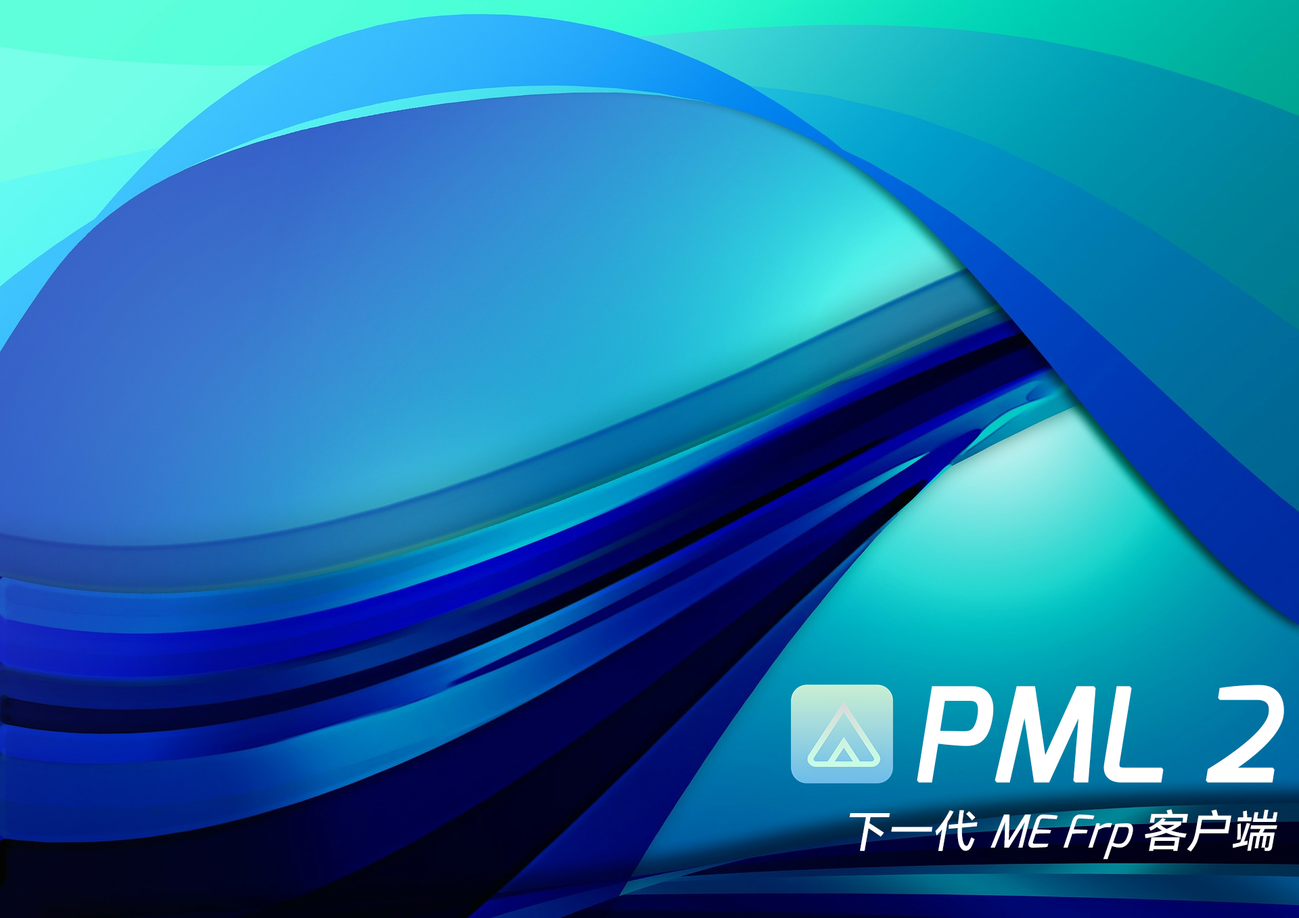
<style>
.page{position:relative;width:1299px;height:918px}
.page>*{position:absolute;margin:0}
.t1{font:126.5px "Exo-Medium-Italic";color:#ffffff;font-weight:bold}
.t2{font:44.6px "Exo-Medium-Italic";color:#ffffff;font-style:italic}
.t3{font:44.6px "HarmonyOS_Sans_SC_Medium";color:#ffffff;font-style:italic}
</style>
<div class="page">
<p class="t1" style="left:917px;top:685px;width:367px;height:98px">PML 2</p>
<p class="t2" style="left:849px;top:809px;width:429px;height:51px"><span class="t3">下一代 </span>ME Frp<span class="t3"> 客户端</span></p>
</div>
